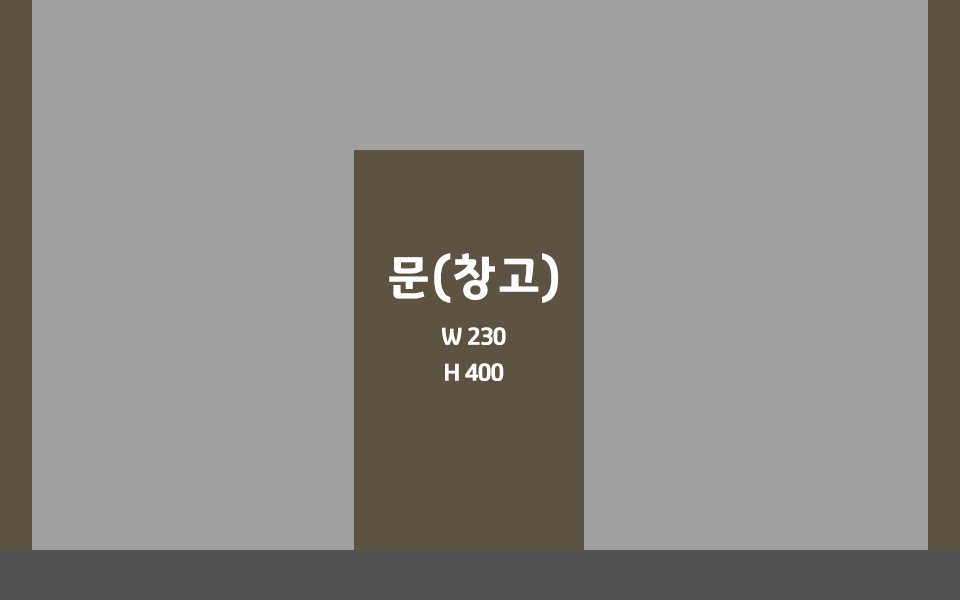
<style>
.page{position:relative;width:960px;height:600px;background:#a0a0a0}
.page>*{position:absolute;margin:0}
.t1{font:24px/36px "GyeonggiTitleV";letter-spacing:-0.05em;color:#ffffff}
.t2{font:48px/36px "GyeonggiTitleV";letter-spacing:-0.05em;color:#ffffff}
</style>
<div class="page">
<p class="t1" style="left:389px;top:253px;width:169px;height:128px;text-align:center"><span class="t2">문(창고)<br><br></span>W 230<br>H 400</p>
</div>
